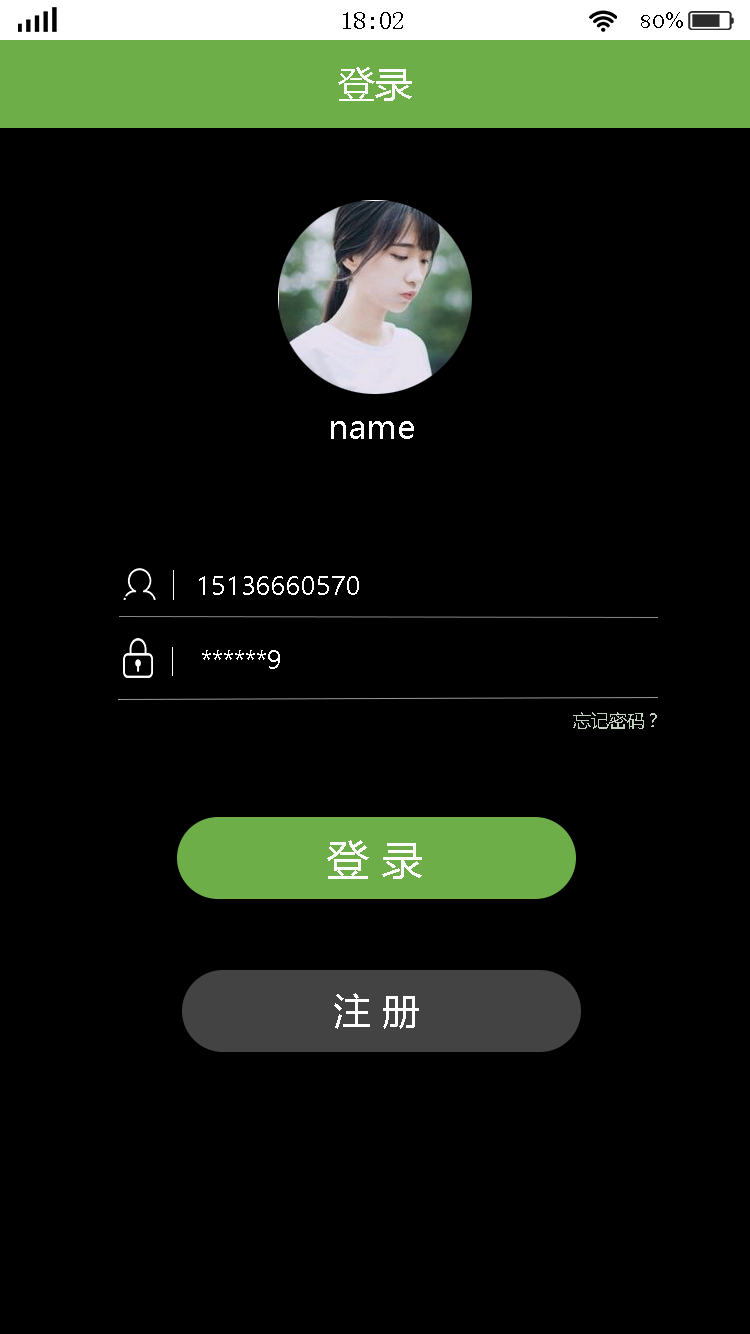
<style>
.page{position:relative;width:750px;height:1334px;background:#000000}
.page>*{position:absolute;margin:0}
.t1{font:25px "SimSun";color:#000000}
.t2{font:25px "BellMT";color:#000000}
.t3{font:37.5px "MicrosoftYaHei";color:#ffffff}
.t4{font:33.3px "MicrosoftYaHei";color:#ffffff}
.t5{font:25px "MicrosoftYaHei";color:#ffffff}
.t6{font:17.6px "MicrosoftYaHei";color:#bfd0bc}
.t7{font:41.7px "MicrosoftYaHei";color:#ffffff}
.t8{font:37.5px "MicrosoftYaHei";color:#fefefe}
</style>
<div class="page">
<p class="t1" style="left:343px;top:12px;width:60px;height:17px">18:02</p>
<p class="t2" style="left:641px;top:12px;width:42px;height:16px">80%</p>
<p class="t3" style="left:338px;top:67px;width:74px;height:34px">登录</p>
<p class="t4" style="left:331px;top:421px;width:83px;height:18px">name</p>
<p class="t5" style="left:199px;top:576px;width:160px;height:19px">15136660570</p>
<p class="t5" style="left:202px;top:650px;width:78px;height:19px">******9</p>
<p class="t6" style="left:573px;top:712px;width:84px;height:17px">忘记密码？</p>
<p class="t7" style="left:327px;top:840px;width:95px;height:39px">登 录</p>
<p class="t8" style="left:334px;top:993px;width:85px;height:36px">注 册</p>
</div>
